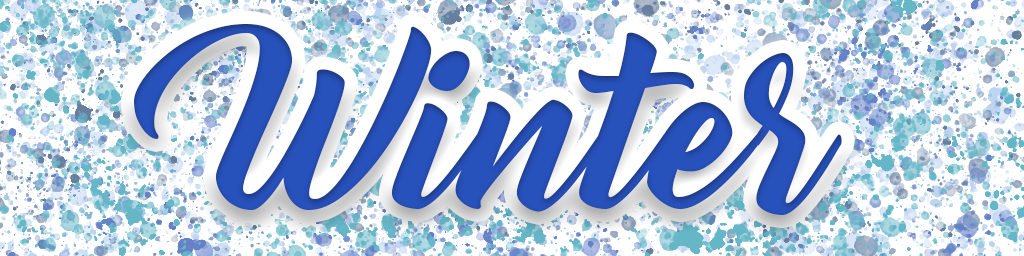
<style>
.page{position:relative;width:1024px;height:256px;background:#ffffff}
.page>*{position:absolute;margin:0}
.t1{font:215.1px "Bernadette";color:#2751bb}
</style>
<div class="page">
<p class="t1" style="left:134px;top:24px;width:708px;height:191px">Winter</p>
</div>
